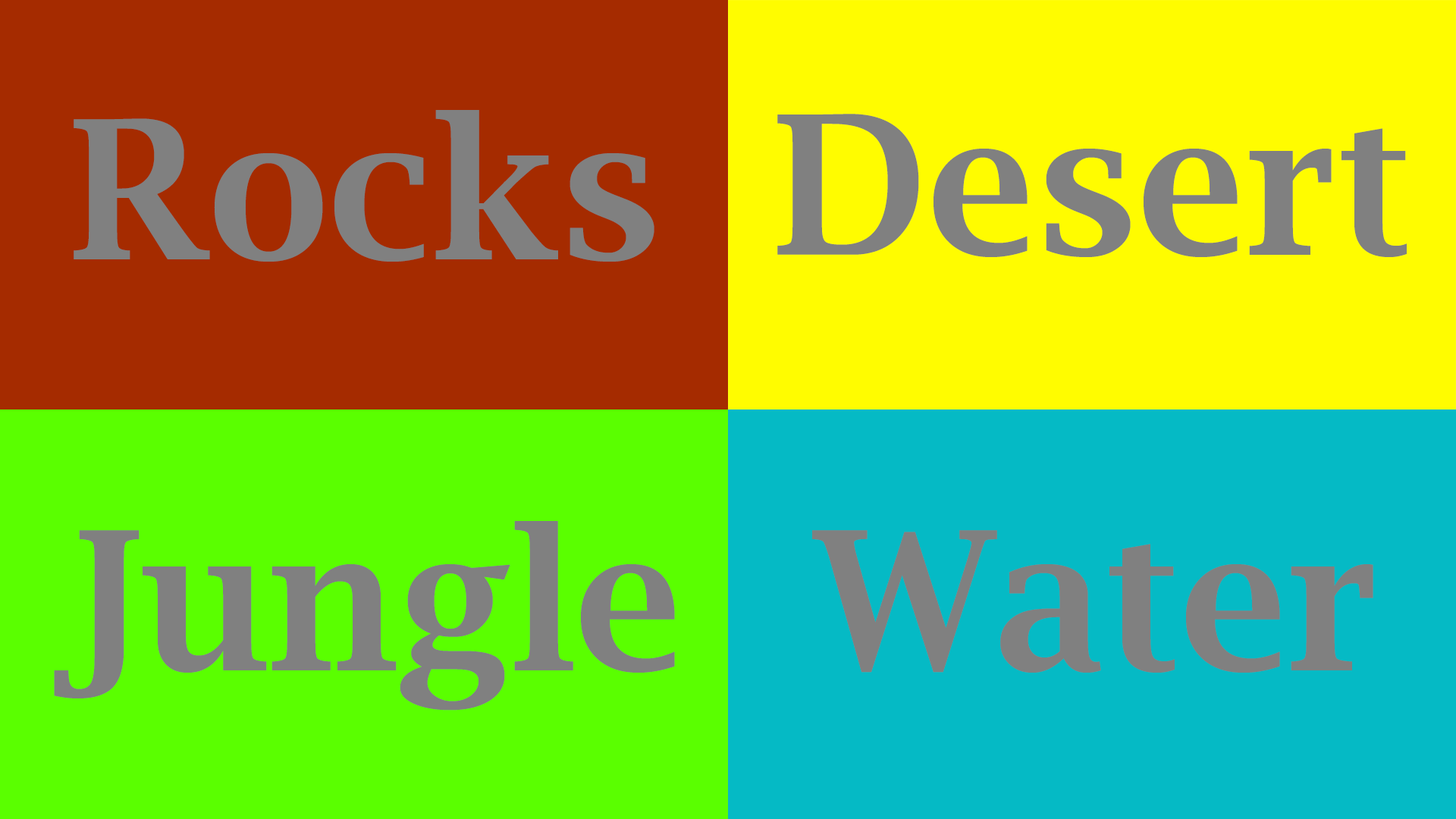
<style>
.page{position:relative;width:1456px;height:819px;background:#a52b00}
.page>*{position:absolute;margin:0}
.t1{font:193.7px "LucidaBright-Demi";color:#808080}
</style>
<div class="page">
<p class="t1" style="left:74px;top:110px;width:580px;height:152px">Rocks</p>
<p class="t1" style="left:777px;top:114px;width:630px;height:143px">Desert</p>
<p class="t1" style="left:54px;top:521px;width:621px;height:190px">Jungle</p>
<p class="t1" style="left:812px;top:530px;width:561px;height:143px">Water</p>
</div>
